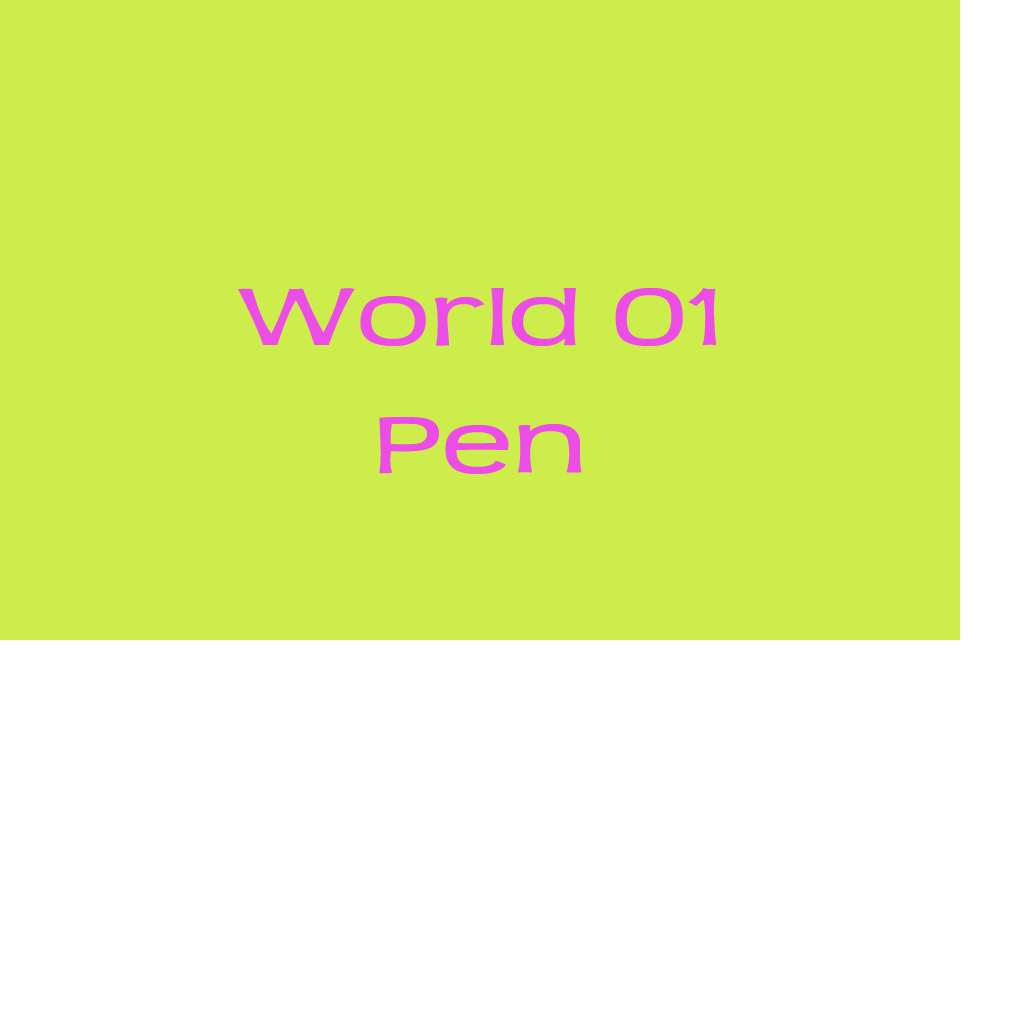
<style>
.page{position:relative;width:1024px;height:1024px;background:#cded4d}
.page>*{position:absolute;margin:0}
.t1{font:89.6px/128px "Teen";color:#ed4de7;scale:1.43 1}
</style>
<div class="page">
<p class="t1" style="left:238px;top:288px;width:479px;height:186px;text-align:center">World 01<br>Pen</p>
</div>
